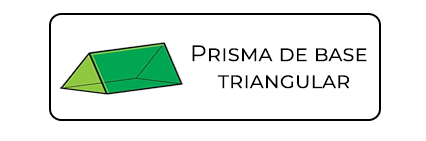
<style>
.page{position:relative;width:426px;height:141px;background:#ffffff}
.page>*{position:absolute;margin:0}
.t1{font:22.5px "Montserrat-Regular";color:#000000;font-variant:small-caps}
</style>
<div class="page">
<p class="t1" style="left:192px;top:45px;width:175px;height:44px">Prisma de base<br> triangular</p>
</div>
